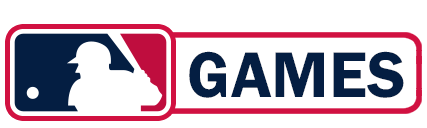
<style>
.page{position:relative;width:427px;height:128px;background:#ffffff}
.page>*{position:absolute;margin:0}
.t1{font:66.7px "FranklinGothic-Demi";color:#041e42}
</style>
<div class="page">
<p class="t1" style="left:189px;top:51px;width:215px;height:47px">GAMES</p>
</div>
